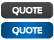
<style>
.page{position:relative;width:54px;height:40px;background:#ffffff}
.page>*{position:absolute;margin:0}
.t1{font:9px "Sansation-Bold";letter-spacing:-0.05em;color:#ffffff;font-weight:bold}
</style>
<div class="page">
<p class="t1" style="left:12px;top:7px;width:31px;height:9px">QUOTE</p>
<p class="t1" style="left:12px;top:27px;width:31px;height:9px">QUOTE</p>
</div>
